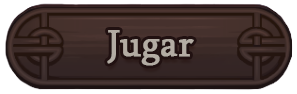
<style>
.page{position:relative;width:297px;height:94px}
.page>*{position:absolute;margin:0}
.t1{font:37.5px "Sylfaen";font-weight:bold}
.t2{font:37.5px "Sylfaen";color:#b3aca3;font-weight:bold}
</style>
<div class="page">
<p class="t1" style="left:107px;top:27px;width:87px;height:36px">Jugar</p>
<p class="t2" style="left:107px;top:30px;width:87px;height:36px">Jugar</p>
</div>
